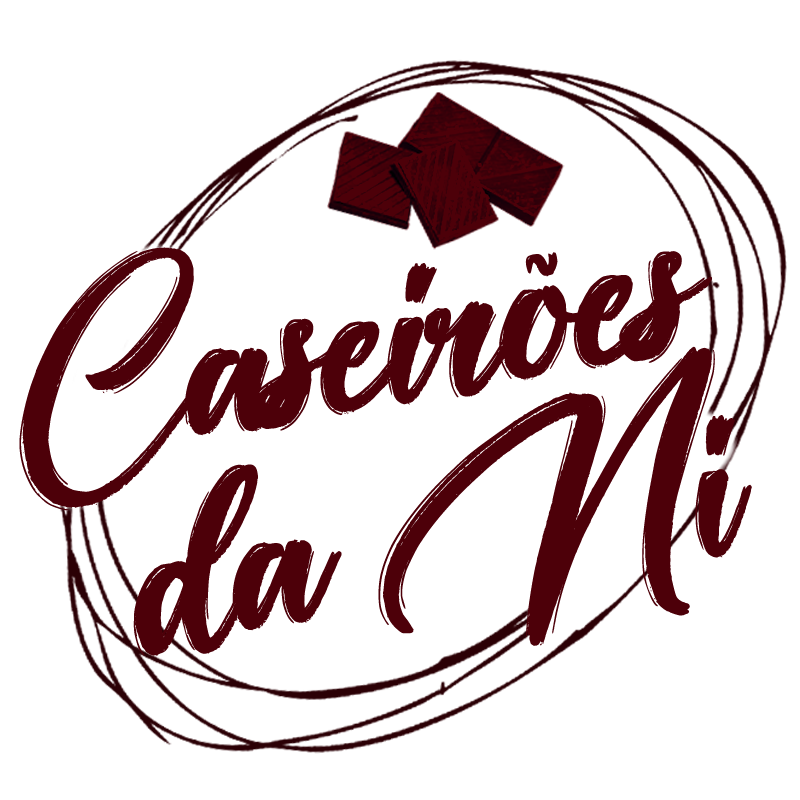
<style>
.page{position:relative;width:800px;height:800px;background:#ffffff}
.page>*{position:absolute;margin:0}
.t1{font:290.2px "Daughter-of-Fortune";letter-spacing:-0.025em;color:#4d0009}
</style>
<div class="page">
<p class="t1" style="left:19px;top:247px;width:693px;height:264px;rotate:-10deg">Caseirões</p>
<p class="t1" style="left:378px;top:346px;width:374px;height:300px;rotate:-16deg">Ni</p>
<p class="t1" style="left:133px;top:464px;width:209px;height:192px;rotate:-15deg">da</p>
</div>
